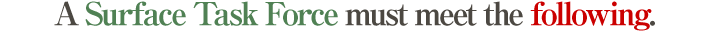
<style>
.page{position:relative;width:709px;height:31px;background:#ffffff}
.page>*{position:absolute;margin:0}
.t1{font:32px "RyuminPro-ExBold";letter-spacing:-0.08em;color:#508154}
.t2{font:32px "RyuminPro-ExBold";letter-spacing:-0.08em;color:#4c4842}
.t3{font:32px "RyuminPro-ExBold";letter-spacing:-0.08em;color:#cb0000}
</style>
<div class="page">
<p class="t1" style="left:54px;top:1px;width:601px;height:30px"><span class="t2">A </span>Surface Task Force<span class="t2"> must meet the </span><span class="t3">following</span><span class="t2">.</span></p>
</div>
